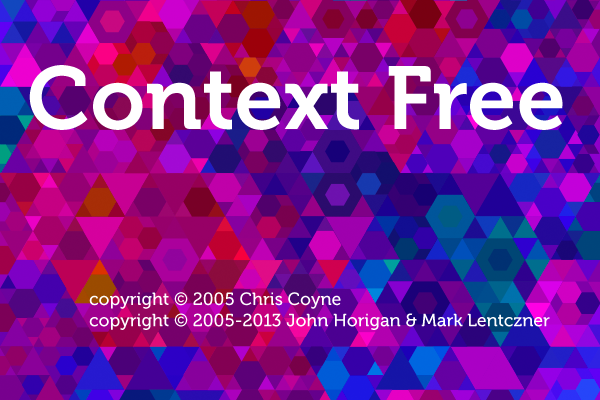
<style>
.page{position:relative;width:600px;height:400px}
.page>*{position:absolute;margin:0}
.t1{font:88.8px "Museo700-Regular";color:#ffffff}
.t2{font:17.8px "Museo500-Regular";color:#ffffff}
</style>
<div class="page">
<p class="t1" style="left:29px;top:65px;width:534px;height:65px">Context Free</p>
<p class="t2" style="left:89px;top:292px;width:461px;height:38px">copyright © 2005 Chris Coyne<br>copyright © 2005-2013 John Horigan &amp; Mark Lentczner</p>
</div>
